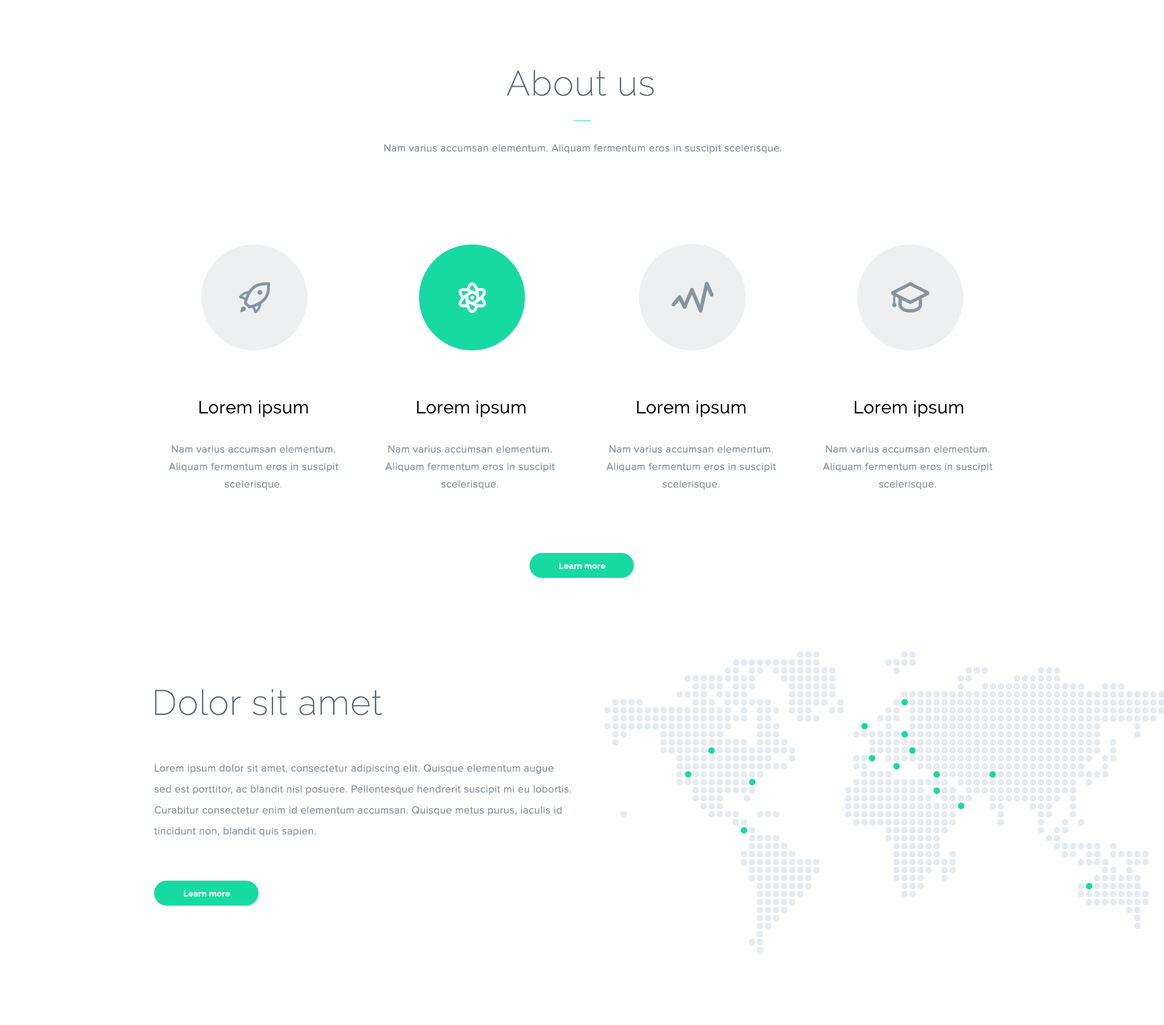
<style>
.page{position:relative;width:1164px;height:1025px;background:#ffffff}
.page>*{position:absolute;margin:0}
.t1{font:10.5px/55.9px "ProximaNova-Regular";letter-spacing:0.025em;color:#87949e}
.t2{font:34.9px/55.9px "Raleway-ExtraLight";letter-spacing:0.025em;color:#576671}
.t3{font:17.5px "Raleway";letter-spacing:0.025em;color:#000000}
.t4{font:10.5px/17.5px "ProximaNova-Regular";letter-spacing:0.025em;color:#87949e}
.t5{font:8.1px "Raleway-Bold";letter-spacing:0.025em;color:#ffffff}
.t6{font:34.9px "Raleway-ExtraLight";letter-spacing:0.025em;color:#576671}
.t7{font:10.5px/20.9px "ProximaNova-Regular";letter-spacing:0.025em;color:#87949e}
</style>
<div class="page">
<p class="t1" style="left:384px;top:70px;width:397px;height:84px;text-align:center"><span class="t2">About us<br></span>Nam varius accumsan elementum. Aliquam fermentum eros in suscipit scelerisque.</p>
<p class="t3" style="left:199px;top:400px;width:109px;height:17px">Lorem ipsum</p>
<p class="t3" style="left:417px;top:400px;width:108px;height:17px">Lorem ipsum</p>
<p class="t3" style="left:637px;top:400px;width:108px;height:17px">Lorem ipsum</p>
<p class="t3" style="left:854px;top:400px;width:109px;height:17px">Lorem ipsum</p>
<p class="t4" style="left:169px;top:445px;width:170px;height:44px;text-align:center">Nam varius accumsan elementum. Aliquam fermentum eros in suscipit scelerisque.</p>
<p class="t4" style="left:385px;top:445px;width:170px;height:44px;text-align:center">Nam varius accumsan elementum. Aliquam fermentum eros in suscipit scelerisque.</p>
<p class="t4" style="left:606px;top:445px;width:170px;height:44px;text-align:center">Nam varius accumsan elementum. Aliquam fermentum eros in suscipit scelerisque.</p>
<p class="t4" style="left:823px;top:445px;width:170px;height:44px;text-align:center">Nam varius accumsan elementum. Aliquam fermentum eros in suscipit scelerisque.</p>
<p class="t5" style="left:559px;top:563px;width:47px;height:6px">Learn more</p>
<p class="t6" style="left:155px;top:689px;width:227px;height:26px">Dolor sit amet</p>
<p class="t7" style="left:154px;top:764px;width:417px;height:72px">Lorem ipsum dolor sit amet, consectetur adipiscing elit. Quisque elementum augue sed est porttitor, ac blandit nisl posuere. Pellentesque hendrerit suscipit mi eu lobortis. Curabitur consectetur enim id elementum accumsan. Quisque metus purus, iaculis id tincidunt non, blandit quis sapien.</p>
<p class="t5" style="left:184px;top:890px;width:46px;height:7px">Learn more</p>
</div>
